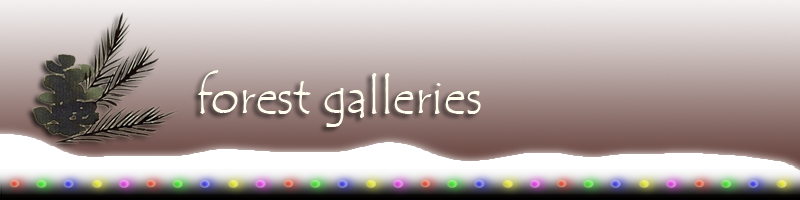
<style>
.page{position:relative;width:800px;height:200px}
.page>*{position:absolute;margin:0}
.t1{font:48px "TempusSansITC";color:#fffeee}
</style>
<div class="page">
<p class="t1" style="left:198px;top:70px;width:283px;height:57px">forest galleries</p>
</div>
